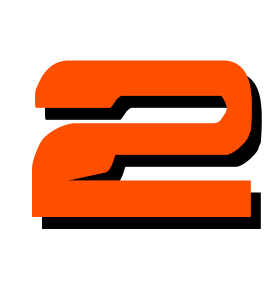
<style>
.page{position:relative;width:274px;height:300px;background:#ffffff}
.page>*{position:absolute;margin:0}
.t1{font:250px "Interdiction";color:#fe4e00}
.t2{font:250px "Interdiction"}
</style>
<div class="page">
<p class="t1" style="left:32px;top:60px;width:220px;height:157px">2</p>
<p class="t2" style="left:42px;top:72px;width:220px;height:157px">2</p>
</div>
